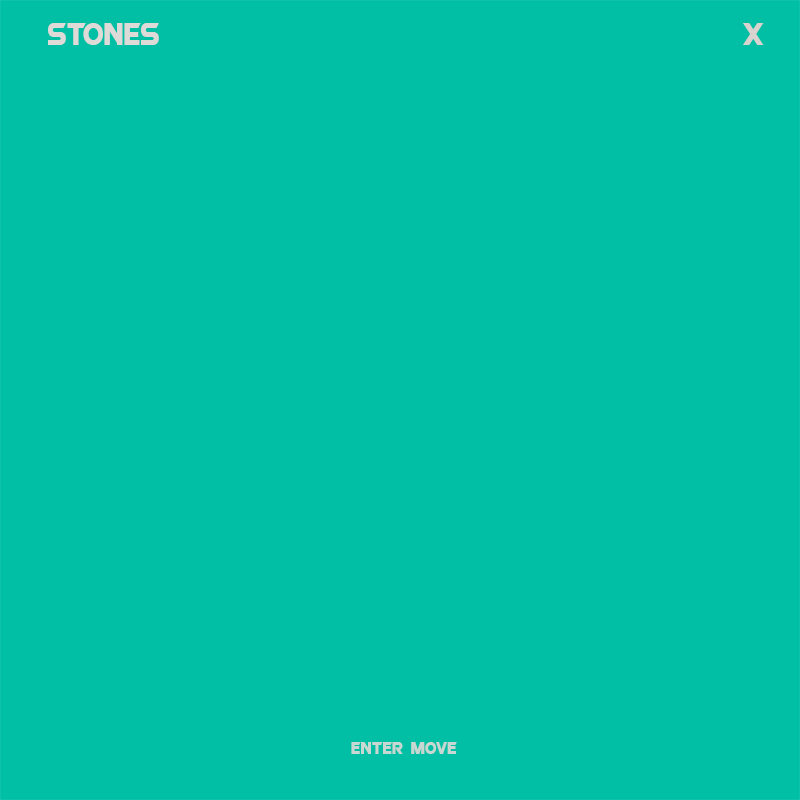
<style>
.page{position:relative;width:800px;height:800px;background:#00bfa5}
.page>*{position:absolute;margin:0}
.t1{font:26.7px "ROBO";color:#dddad8}
.t2{font:26.7px "ROBO";color:#d9d3d0}
.t3{font:15px "ROBO";color:#c7d7d1}
</style>
<div class="page">
<p class="t1" style="left:48px;top:23px;width:111px;height:22px">Stones</p>
<p class="t2" style="left:743px;top:23px;width:21px;height:22px">X</p>
<p class="t3" style="left:351px;top:742px;width:106px;height:12px">enter MOVe</p>
</div>
